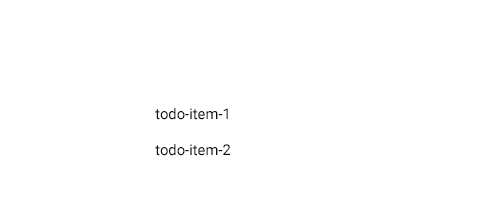
<style>
.page{position:relative;width:500px;height:200px;background:#ffffff}
.page>*{position:absolute;margin:0}
.t1{font:14.8px "Roboto-Regular";color:#0d0c0c}
</style>
<div class="page">
<p class="t1" style="left:155px;top:108px;width:73px;height:12px">todo-item-1</p>
<p class="t1" style="left:155px;top:144px;width:76px;height:12px">todo-item-2</p>
</div>
